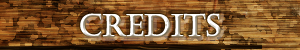
<style>
.page{position:relative;width:300px;height:50px}
.page>*{position:absolute;margin:0}
.t1{font:30px "Castellar";color:#ffffff;font-weight:bold}
</style>
<div class="page">
<p class="t1" style="left:80px;top:13px;width:141px;height:24px">credits</p>
</div>
